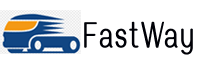
<style>
.page{position:relative;width:200px;height:60px;background:#ffffff}
.page>*{position:absolute;margin:0}
.t1{font:37.4px "Gayathri-Regular";letter-spacing:0.08em;color:#000107;font-weight:bold;scale:0.67 1}
</style>
<div class="page">
<p class="t1" style="left:84px;top:21px;width:109px;height:34px">FastWay</p>
</div>
